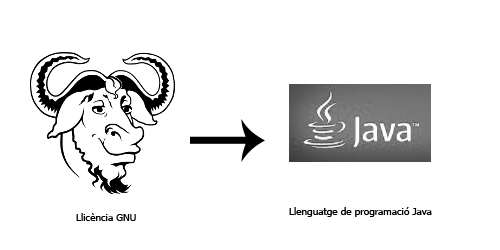
<style>
.page{position:relative;width:500px;height:250px;background:#ffffff}
.page>*{position:absolute;margin:0}
.t1{font:10px "Tahoma";color:#000000}
</style>
<div class="page">
<p class="t1" style="left:289px;top:207px;width:143px;height:10px">Llenguatge de programació Java</p>
<p class="t1" style="left:76px;top:213px;width:60px;height:8px">Llicència GNU</p>
</div>
